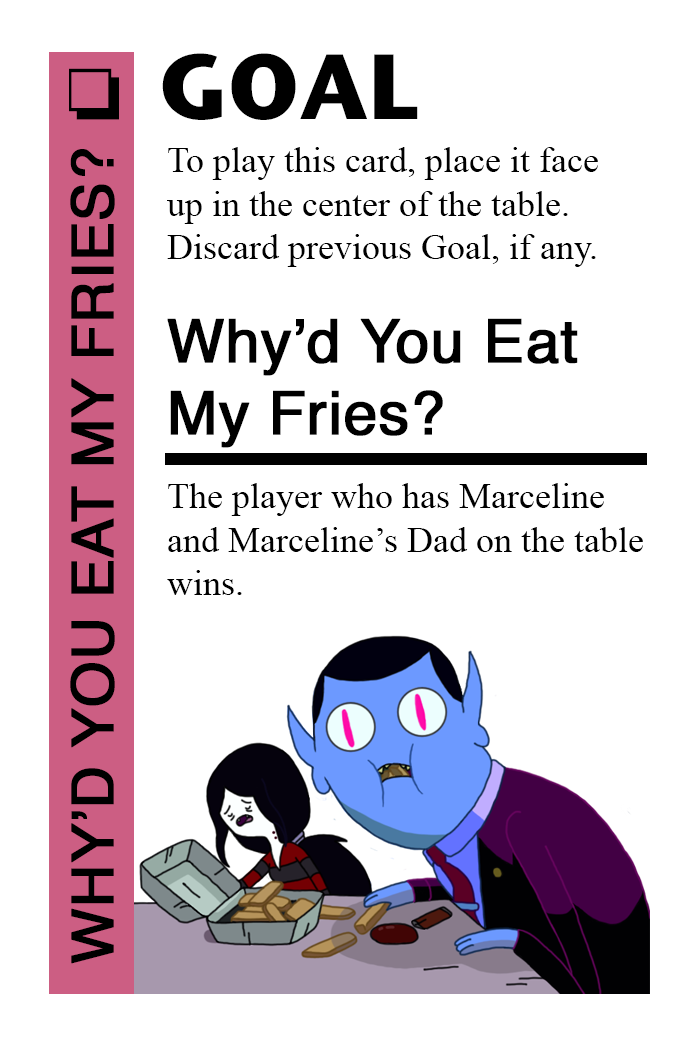
<style>
.page{position:relative;width:700px;height:1042px;background:#ffffff}
.page>*{position:absolute;margin:0}
.t1{font:92px "StoneSansITC-Bold";color:#000000}
.t2{font:72px "MS-Gothic";color:#000000}
.t3{font:58px "Helvetica";color:#000000;font-weight:bold}
.t4{font:36px "TimesNewRomanPSMT";color:#000000}
.t5{font:60px "Helvetica";color:#000000;font-weight:bold}
</style>
<div class="page">
<p class="t1" style="left:162px;top:53px;width:256px;height:67px">GOAL</p>
<p class="t2" style="left:69px;top:68px;width:50px;height:52px">❏</p>
<p class="t3" style="left:70px;top:149px;width:45px;height:815px;rotate:-90deg">WHY’D YOU EAT MY FRIES?</p>
<p class="t4" style="left:167px;top:147px;width:431px;height:120px">To play this card, place it face<br>up in the center of the table.<br>Discard previous Goal, if any.</p>
<p class="t5" style="left:167px;top:318px;width:411px;height:130px">Why’d You Eat <br>My Fries?</p>
<p class="t4" style="left:167px;top:483px;width:476px;height:112px">The player who has Marceline<br>and Marceline’s Dad on the table <br>wins.</p>
</div>
